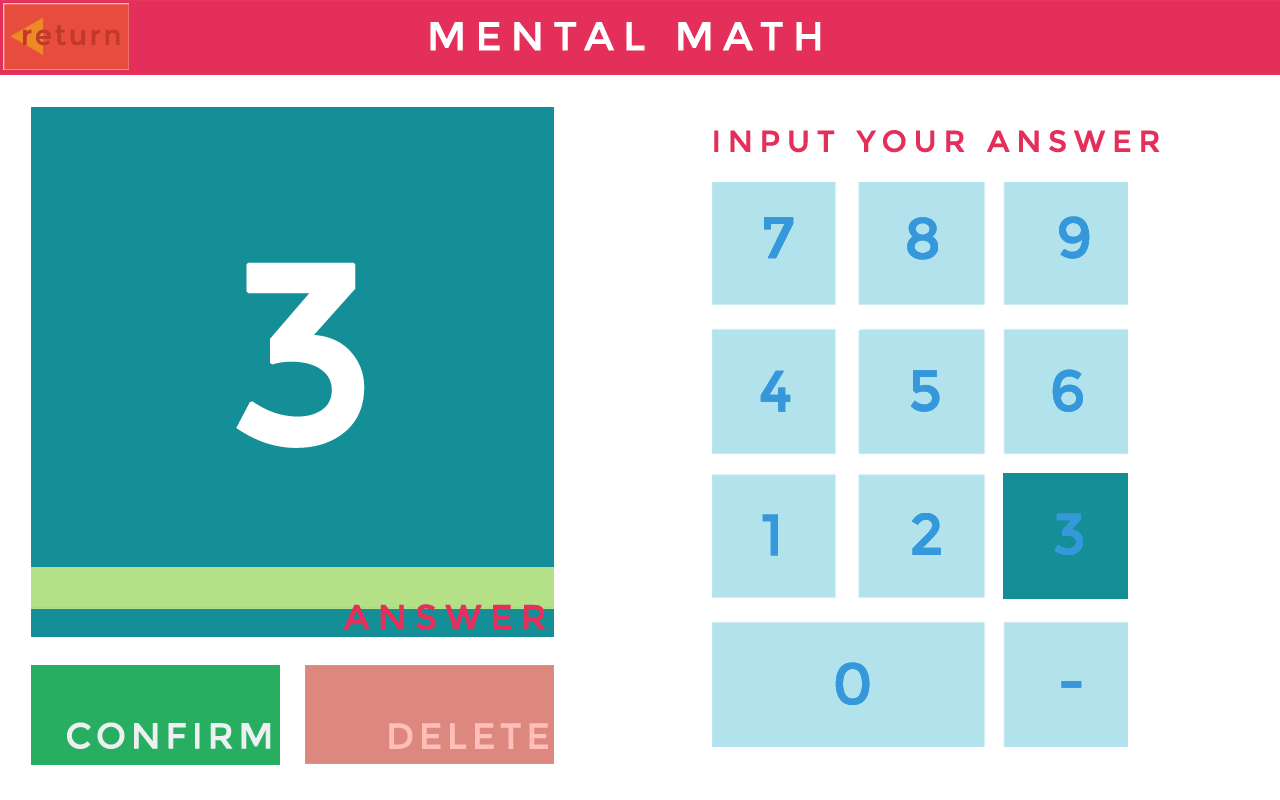
<style>
.page{position:relative;width:1280px;height:800px;background:#ffffff}
.page>*{position:absolute;margin:0}
.t1{font:30px "Montserrat-Regular";letter-spacing:0.2em;color:#e42f5a;text-transform:uppercase;font-weight:bold}
.t2{font:57.6px "Montserrat-Regular";letter-spacing:0.2em;color:#3598db;text-transform:uppercase;font-weight:bold}
.t3{font:256.5px "Montserrat-Regular";letter-spacing:0.2em;color:#ffffff;text-transform:uppercase;font-weight:bold}
.t4{font:35.1px "Montserrat-Regular";letter-spacing:0.2em;color:#e42f5a;text-transform:uppercase;font-weight:bold}
.t5{font:36px "Montserrat-Regular";letter-spacing:0.1em;color:#ecf0f1;text-transform:uppercase;font-weight:bold}
.t6{font:36px "Montserrat-Regular";letter-spacing:0.1em;color:#ffbfb8;text-transform:uppercase;font-weight:bold}
</style>
<div class="page">
<p class="t1" style="left:714px;top:130px;width:446px;height:23px">Input your Answer</p>
<p class="t2" style="left:764px;top:217px;width:30px;height:42px">7</p>
<p class="t2" style="left:907px;top:217px;width:31px;height:43px">8</p>
<p class="t2" style="left:1059px;top:216px;width:31px;height:43px">9</p>
<p class="t3" style="left:236px;top:262px;width:129px;height:186px">3</p>
<p class="t2" style="left:760px;top:370px;width:31px;height:42px">4</p>
<p class="t2" style="left:911px;top:370px;width:29px;height:42px">5</p>
<p class="t2" style="left:1052px;top:369px;width:31px;height:43px">6</p>
<p class="t2" style="left:762px;top:514px;width:16px;height:42px">1</p>
<p class="t2" style="left:912px;top:513px;width:29px;height:42px">2</p>
<p class="t2" style="left:1054px;top:513px;width:29px;height:42px">3</p>
<p class="t4" style="left:343px;top:604px;width:202px;height:26px">Answer</p>
<p class="t2" style="left:835px;top:662px;width:35px;height:43px">0</p>
<p class="t2" style="left:1061px;top:681px;width:21px;height:7px">-</p>
<p class="t5" style="left:67px;top:722px;width:204px;height:27px">Confirm</p>
<p class="t6" style="left:389px;top:723px;width:159px;height:26px">Delete</p>
</div>
